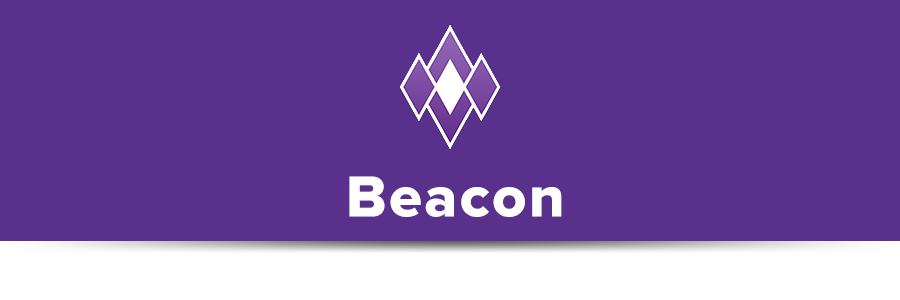
<style>
.page{position:relative;width:900px;height:300px;background:#5a308d}
.page>*{position:absolute;margin:0}
.t1{font:60px "ProximaNova-Extrabld";letter-spacing:0.04em;color:#ffffff}
</style>
<div class="page">
<p class="t1" style="left:349px;top:176px;width:213px;height:41px">Beacon</p>
</div>
